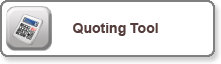
<style>
.page{position:relative;width:221px;height:64px;background:#ffffff}
.page>*{position:absolute;margin:0}
.t1{font:14px "Arial-BoldMT";color:#543d3b}
</style>
<div class="page">
<p class="t1" style="left:73px;top:23px;width:85px;height:13px">Quoting Tool</p>
</div>
